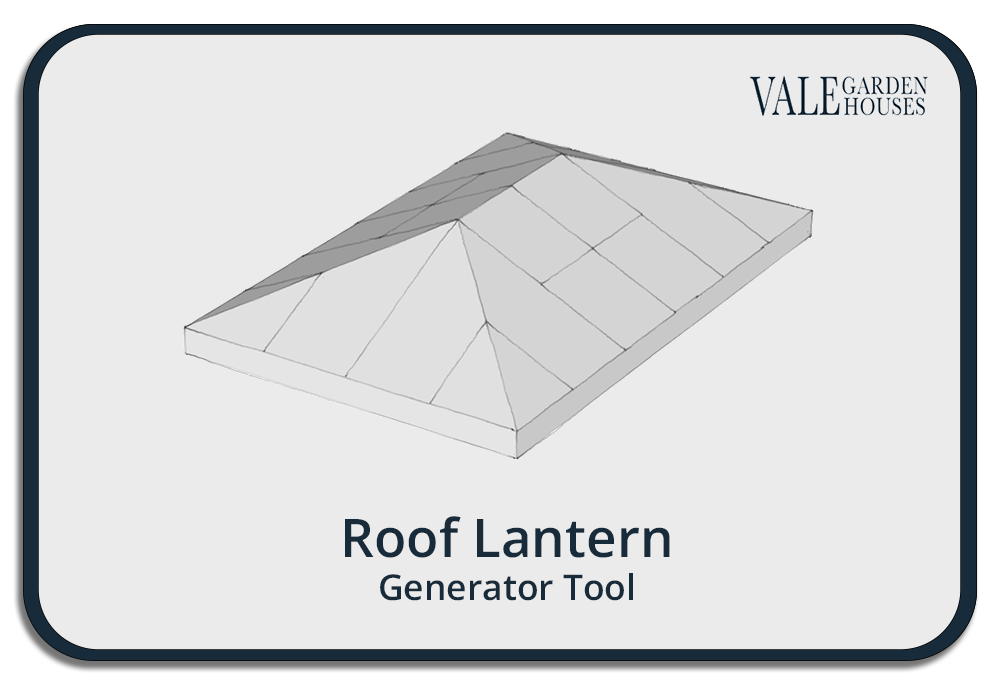
<style>
.page{position:relative;width:1000px;height:685px;background:#ebebeb}
.page>*{position:absolute;margin:0}
.t1{font:35.4px "OpenSans-SemiBold";color:#172b3a}
.t2{font:53.1px "OpenSans-SemiBold";color:#172b3a}
</style>
<div class="page">
<p class="t1" style="left:345px;top:516px;width:325px;height:85px;text-align:center"><span class="t2">Roof Lantern<br></span>Generator Tool</p>
</div>
